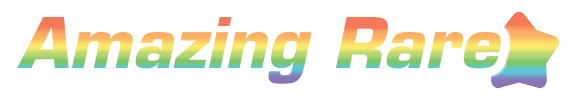
<style>
.page{position:relative;width:575px;height:100px;background:#ffffff}
.page>*{position:absolute;margin:0}
.t1{font:68px "Eurostile-BoldOblique"}
</style>
<div class="page">
<p class="t1" style="left:17px;top:16px;width:484px;height:68px">Amazing Rare</p>
</div>
